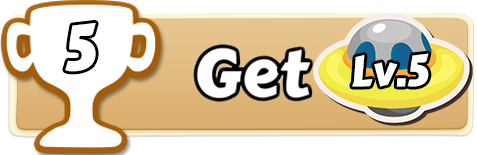
<style>
.page{position:relative;width:477px;height:155px;background:#ffffff}
.page>*{position:absolute;margin:0}
.t1{font:62.2px "CarterOne";color:#ffffff}
.t2{font:42.3px "CarterOne";color:#ffffff}
</style>
<div class="page">
<p class="t1" style="left:65px;top:23px;width:31px;height:49px">5</p>
<p class="t2" style="left:352px;top:53px;width:77px;height:34px">Lv.5</p>
</div>
